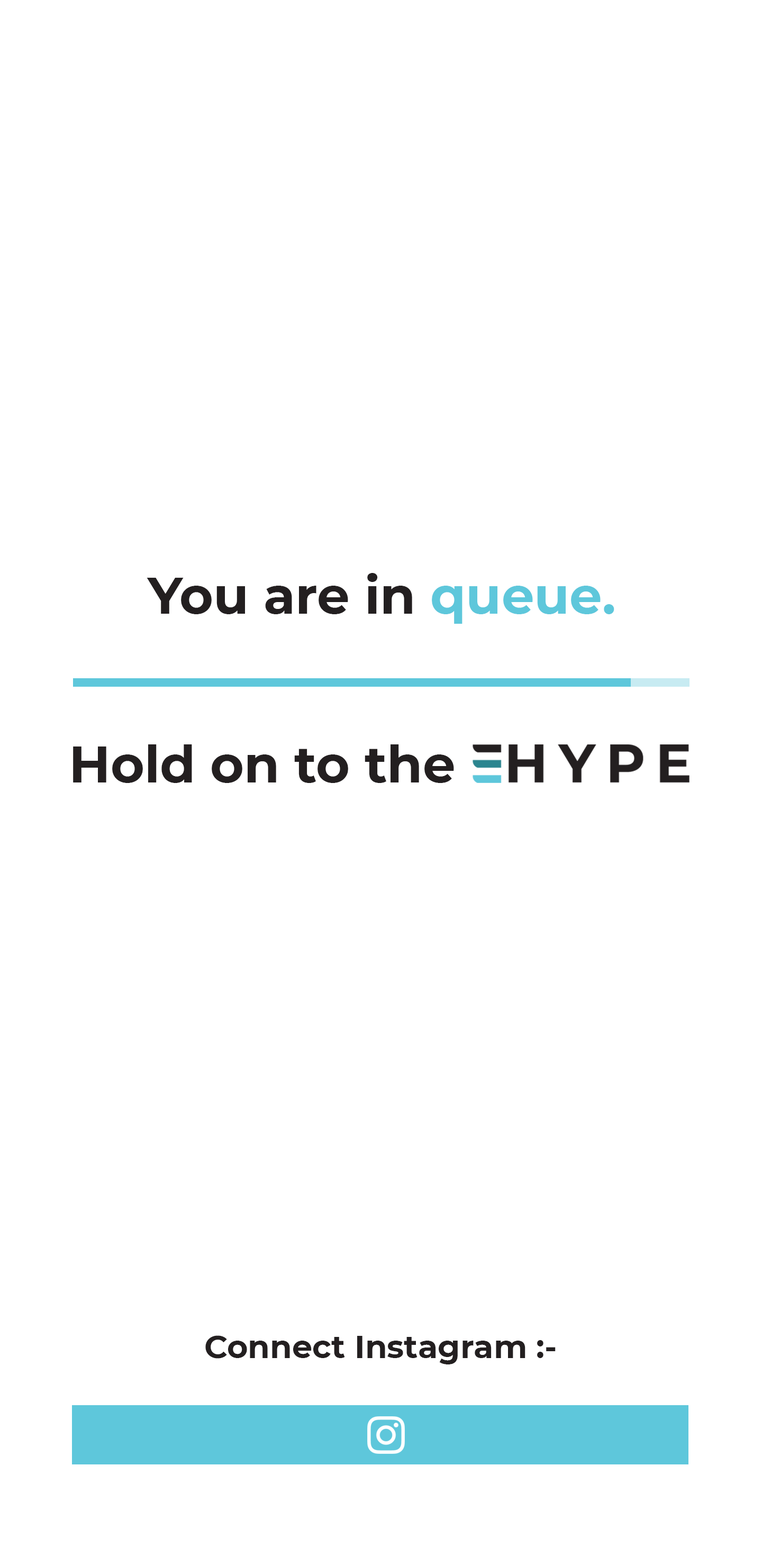
<style>
.page{position:relative;width:762px;height:1566px;background:#ffffff}
.page>*{position:absolute;margin:0}
.t1{font:51.6px "Montserrat-Bold";color:#231f20}
.t2{font:51.6px "Montserrat-Bold";color:#5ec7db}
.t3{font:51.3px "Montserrat-Bold";color:#231f20}
.t4{font:32px "Montserrat-Bold";color:#231f20}
</style>
<div class="page">
<p class="t1" style="left:147px;top:573px;width:467px;height:51px">You are in <span class="t2">queue.</span></p>
<p class="t3" style="left:73px;top:744px;width:381px;height:39px">Hold on to the</p>
<p class="t4" style="left:205px;top:1335px;width:350px;height:29px">Connect Instagram :-</p>
</div>
